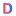
<style>
.page{position:relative;width:16px;height:16px;background:#ffffff}
.page>*{position:absolute;margin:0}
.t1{font:14.7px "Arial-BoldMT"}
</style>
<div class="page">
<p class="t1" style="left:3px;top:3px;width:10px;height:11px">D</p>
</div>
